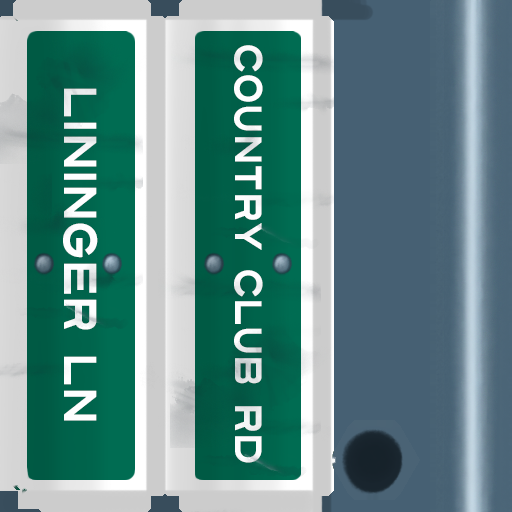
<style>
.page{position:relative;width:512px;height:512px}
.page>*{position:absolute;margin:0}
.t1{font:38px "Turnpike";color:#fefeff;scale:0.75 1}
.t2{font:46px "Turnpike";color:#fefeff;scale:0.75 1}
</style>
<div class="page">
<p class="t1" style="left:234px;top:45px;width:29px;height:418px;rotate:90deg">Country Club Rd</p>
<p class="t2" style="left:63px;top:88px;width:35px;height:333px;rotate:90deg">Lininger Ln</p>
</div>
